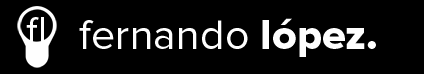
<style>
.page{position:relative;width:424px;height:74px;background:#000000}
.page>*{position:absolute;margin:0}
.t1{font:41.2px "ProximaNova-Regular";color:#fefefe}
.t2{font:43px "ProximaNova-Regular";color:#fefefe}
.t3{font:43px "ProximaNova-Extrabld";color:#fefefe}
</style>
<div class="page">
<p class="t1" style="left:26px;top:17px;width:18px;height:28px">fl</p>
<p class="t2" style="left:79px;top:18px;width:297px;height:39px">fernando <span class="t3">lópez.</span></p>
</div>
